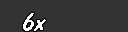
<style>
.page{position:relative;width:128px;height:32px;background:#333333}
.page>*{position:absolute;margin:0}
.t1{font:26px "DomDiagonalBT-Regular";color:#ffffff;scale:1.1 1}
</style>
<div class="page">
<p class="t1" style="left:23px;top:13px;width:23px;height:18px">6x</p>
</div>
